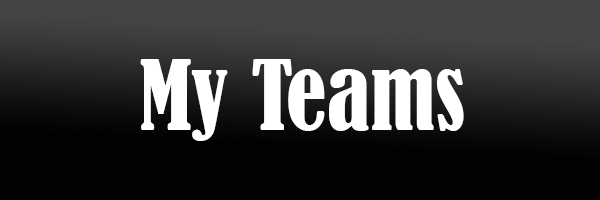
<style>
.page{position:relative;width:600px;height:200px}
.page>*{position:absolute;margin:0}
.t1{font:90px "BernardMT-Condensed";color:#ffffff}
</style>
<div class="page">
<p class="t1" style="left:140px;top:59px;width:324px;height:82px">My Teams</p>
</div>
